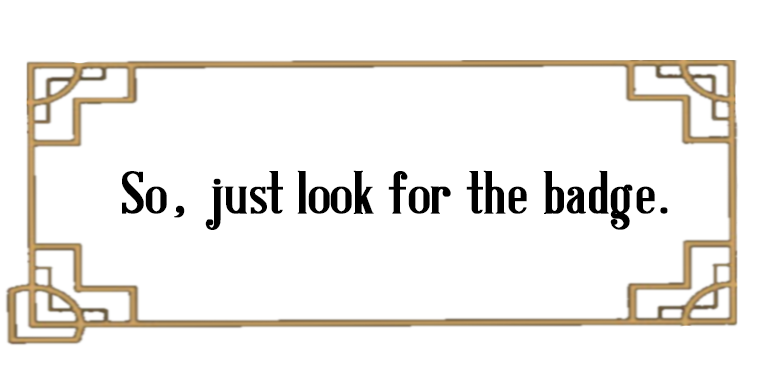
<style>
.page{position:relative;width:777px;height:390px;background:#ffffff}
.page>*{position:absolute;margin:0}
.t1{font:60px "AntiqueBookCover";color:#000000;font-weight:bold}
</style>
<div class="page">
<p class="t1" style="left:122px;top:170px;width:546px;height:60px">So, just look for the badge.</p>
</div>
